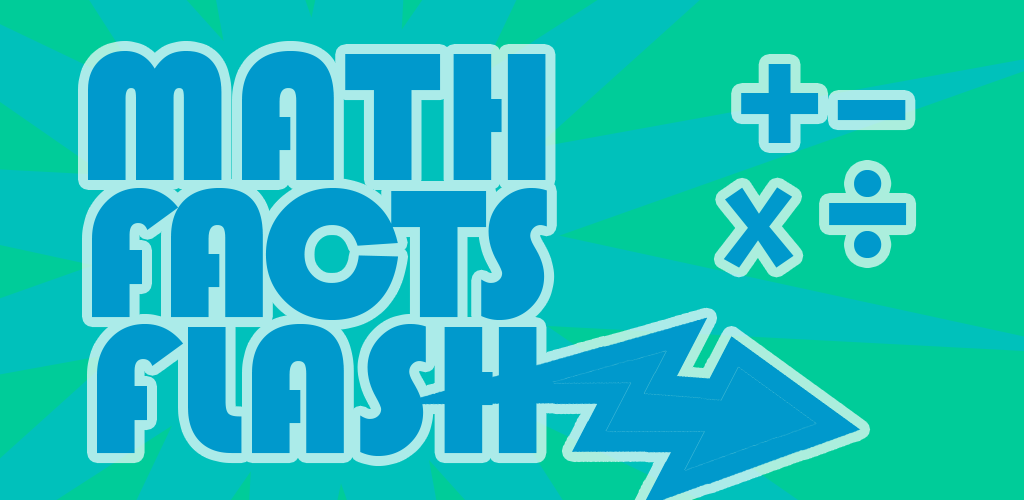
<style>
.page{position:relative;width:1024px;height:500px;background:#0099cc}
.page>*{position:absolute;margin:0}
.t1{font:189.4px/136.4px "Bauhaus93";letter-spacing:-0.066em;color:#0099cc}
.t2{font:189.4px/136.4px "Bauhaus93";color:#0099cc}
.t3{font:153.8px/109.8px "Bauhaus93";letter-spacing:-0.025em;color:#0099cc}
.t4{font:153.8px/109.8px "Acme-Regular";letter-spacing:0.1em;color:#0099cc}
.t5{font:153.8px/109.8px "Bauhaus93";letter-spacing:0.1em;color:#0099cc}
</style>
<div class="page">
<p class="t1" style="left:88px;top:51px;width:459px;height:405px;text-align:center"><span class="t2">MATH<br></span>FACTS<span class="t2"><br>FLASH</span></p>
<p class="t3" style="left:723px;top:64px;width:184px;height:204px">+–<br><span class="t4">x</span><span class="t5">÷</span></p>
</div>
